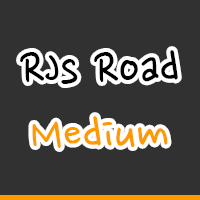
<style>
.page{position:relative;width:200px;height:200px;background:#313131}
.page>*{position:absolute;margin:0}
.t1{font:54px "NanumPen";color:#000000}
.t2{font:54px "NanumPen";color:#ff9900}
</style>
<div class="page">
<p class="t1" style="left:20px;top:50px;width:158px;height:34px">RJs Road</p>
<p class="t2" style="left:32px;top:116px;width:136px;height:32px">Medium</p>
</div>
